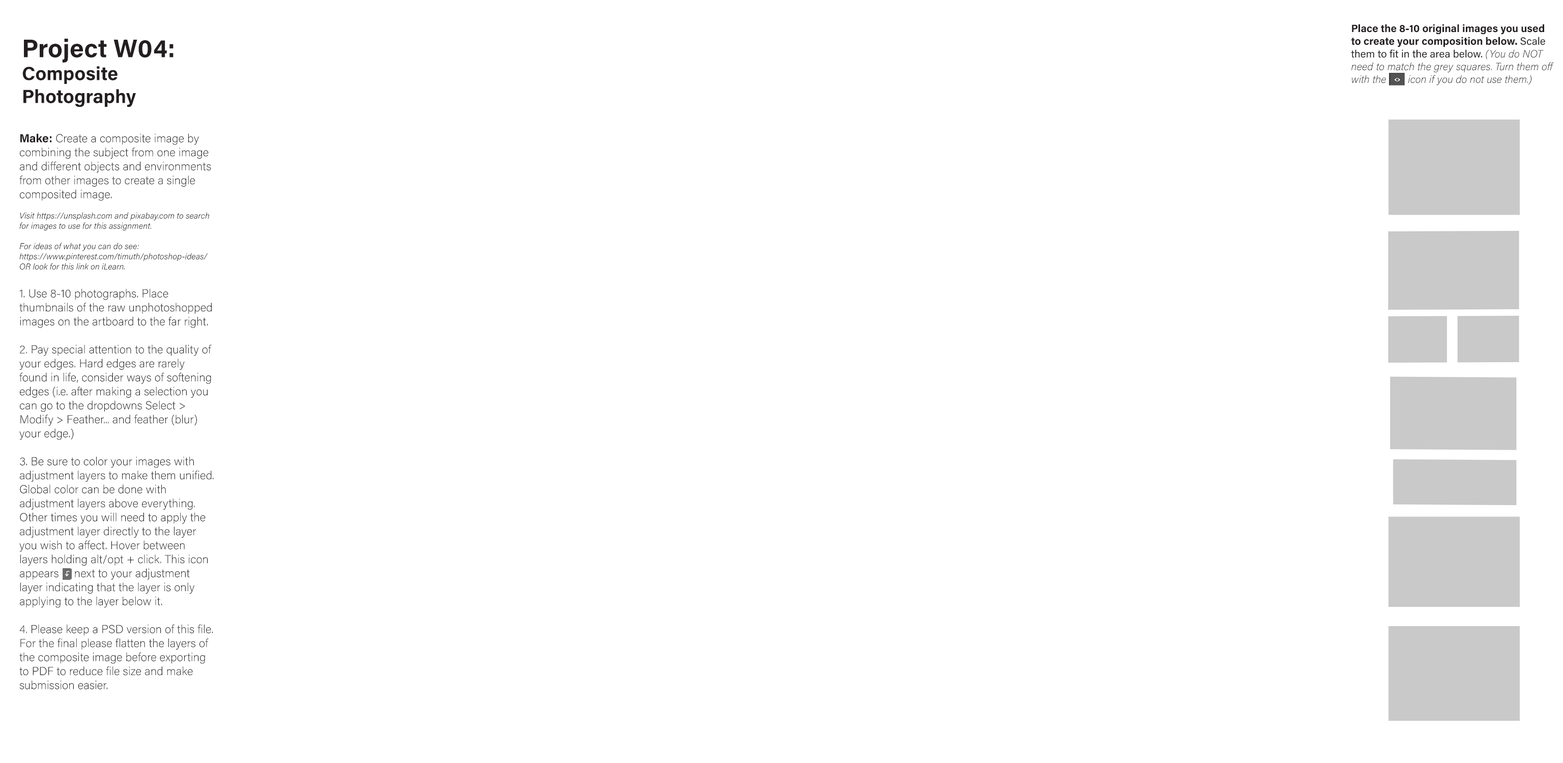
<style>
.page{position:relative;width:1563px;height:763px;background:#ffffff}
.page>*{position:absolute;margin:0}
.t1{font:10.6px "AcuminConcept-ExtraLightItalic";color:#231f20}
.t2{font:10.6px "AcuminConcept-Bold";color:#231f20}
.t3{font:10.6px "AcuminConcept-Regular";color:#231f20}
.t4{font:19.1px "AcuminConcept-Bold";color:#231f20}
.t5{font:25.4px "AcuminConcept-Bold";color:#231f20}
.t6{font:11.7px "AcuminVariableConcept";color:#231f20}
.t7{font:11.7px "AcuminConcept-Bold";color:#231f20}
.t8{font:8.5px "AcuminConcept-LightItalic";color:#231f20}
</style>
<div class="page">
<p class="t1" style="left:1351px;top:24px;width:203px;height:61px"><span class="t2">Place the 8-10 original images you used to create your composition below. </span><span class="t3">Scale them to fit in the area below. </span>(You do NOT need to match the grey squares. Turn them off with the       icon if you do not use them.)</p>
<p class="t4" style="left:22px;top:39px;width:151px;height:68px"><span class="t5">Project W04:<br></span>Composite<br>Photography</p>
<p class="t6" style="left:19px;top:133px;width:195px;height:556px"><span class="t7">Make:</span> Create a composite image by combining the subject from one image and different objects and environments from other images to create a single composited image.<br><br><span class="t8">Visit https://unsplash.com and pixabay.com to search for images to use for this assignment.<br><br>For ideas of what you can do see:<br>https://www.pinterest.com/timuth/photoshop-ideas/<br>OR look for this link on iLearn.<br></span><br>1. Use 8-10 photographs. Place thumbnails of the raw unphotoshopped images on the artboard to the far right.<br><br>2. Pay special attention to the quality of your edges. Hard edges are rarely found in life, consider ways of softening edges (i.e. after making a selection you can go to the dropdowns Select &gt; Modify &gt; Feather... and feather (blur) your edge.)<br><br>3. Be sure to color your images with adjustment layers to make them unified. Global color can be done with adjustment layers above everything. Other times you will need to apply the adjustment layer directly to the layer you wish to affect. Hover between layers holding alt/opt + click. This icon appears     next to your adjustment layer indicating that the layer is only applying to the layer below it.<br><br>4. Please keep a PSD version of this file. For the final please flatten the layers of the composite image before exporting to PDF to reduce file size and make submission easier.</p>
</div>
